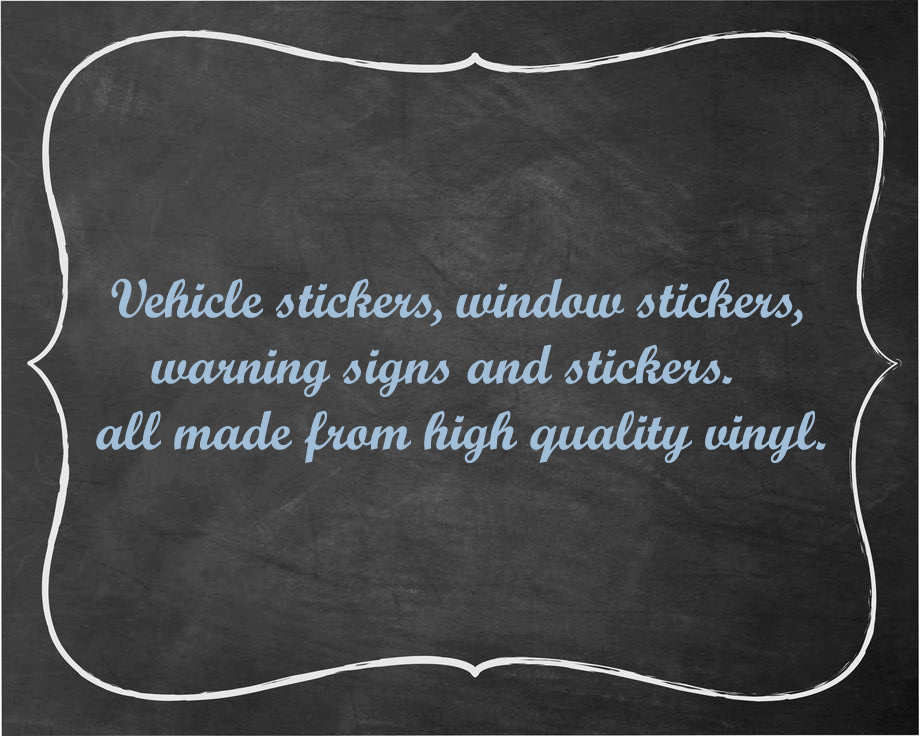
<style>
.page{position:relative;width:920px;height:736px}
.page>*{position:absolute;margin:0}
.t1{font:55px "ScriptMTBold";color:#a1bed9}
</style>
<div class="page">
<p class="t1" style="left:96px;top:278px;width:730px;height:185px">Vehicle stickers, window stickers,<br>     warning signs and stickers.<br> all made from high quality vinyl.</p>
</div>
